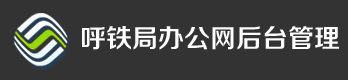
<style>
.page{position:relative;width:348px;height:80px;background:#333333}
.page>*{position:absolute;margin:0}
.t1{font:26px "FZZZHONGJW--GB1-0";color:#ffffff}
</style>
<div class="page">
<p class="t1" style="left:82px;top:26px;width:257px;height:24px">呼铁局办公网后台管理</p>
</div>
